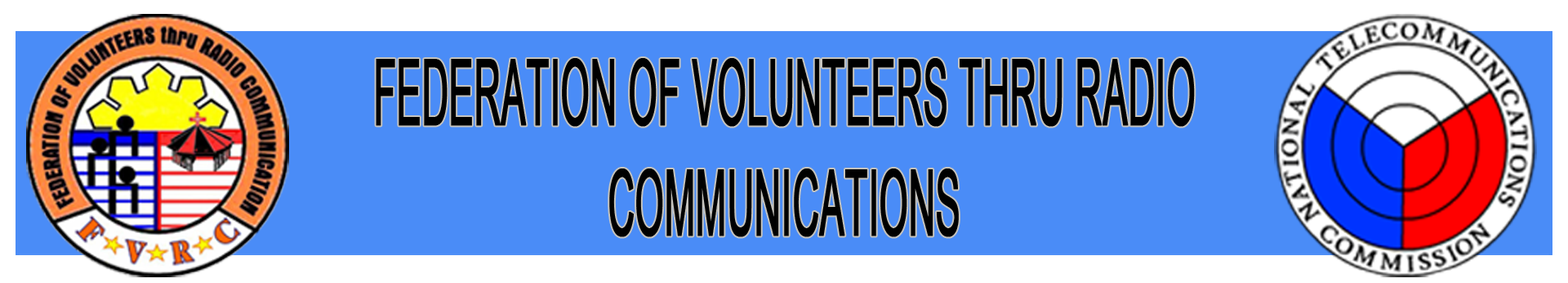
<style>
.page{position:relative;width:1568px;height:283px;background:#4a8cf7}
.page>*{position:absolute;margin:0}
.t1{font:91.6px "ArialMT";color:#000000;text-transform:uppercase;font-weight:bold;scale:0.4 1}
</style>
<div class="page">
<p class="t1" style="left:376px;top:58px;width:819px;height:179px;text-align:center">Federation of Volunteers thru Radio Communications</p>
</div>
